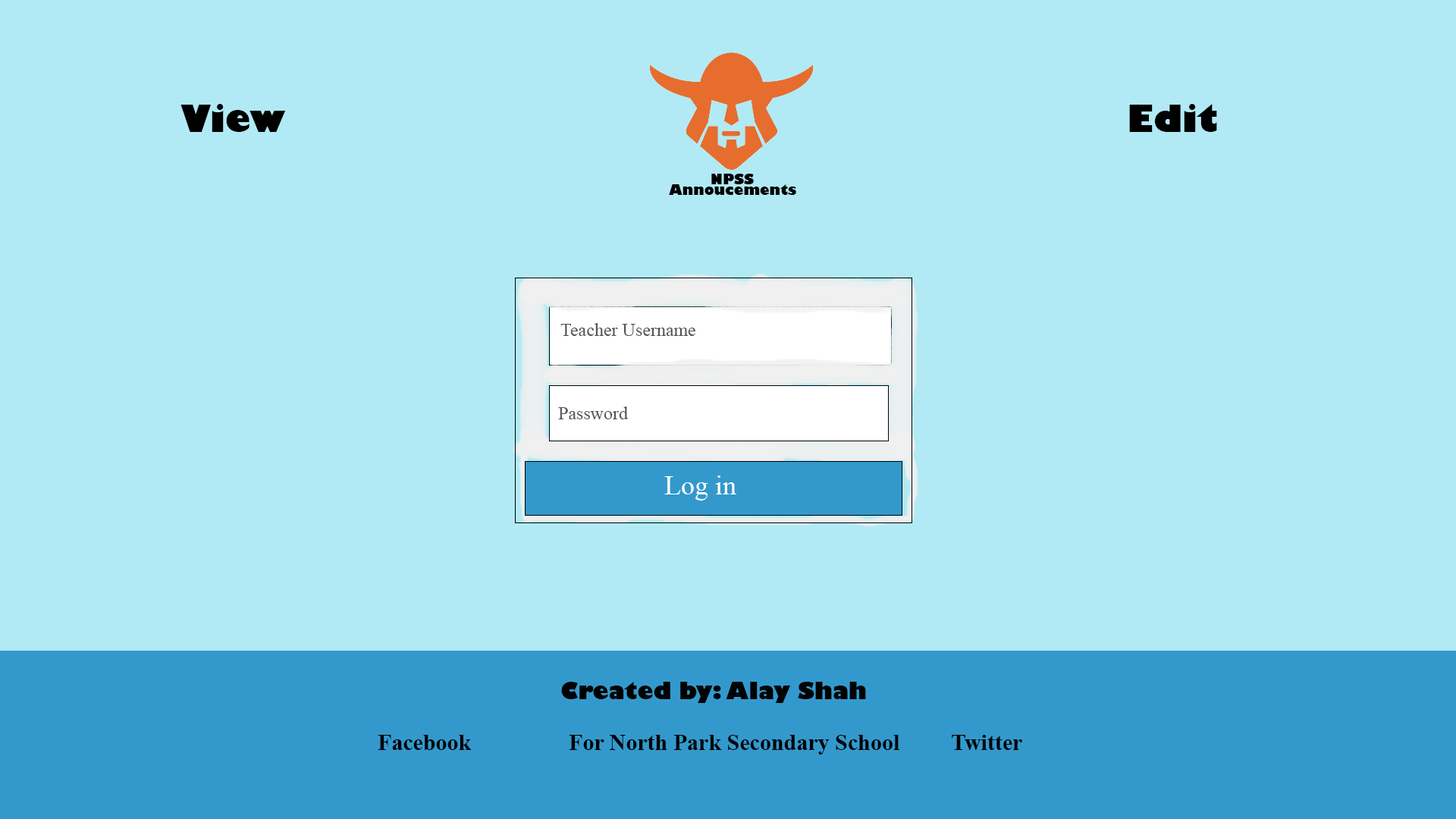
<style>
.page{position:relative;width:1456px;height:819px;background:#b1eaf5}
.page>*{position:absolute;margin:0}
.t1{font:36.4px "GillSans-UltraBold";color:#000000}
.t2{font:18.2px "TimesNewRomanPSMT";color:#555555}
.t3{font:27.3px "TimesNewRomanPSMT";color:#feffff}
.t4{font:22.7px "GillSans-UltraBold";color:#020202}
.t5{font:22.7px "TimesNewRomanPS-BoldMT";color:#020202}
</style>
<div class="page">
<p class="t1" style="left:180px;top:104px;width:106px;height:28px">View</p>
<p class="t1" style="left:1129px;top:104px;width:88px;height:28px">Edit</p>
<p class="t2" style="left:560px;top:323px;width:135px;height:13px">Teacher Username</p>
<p class="t2" style="left:558px;top:406px;width:70px;height:13px">Password</p>
<p class="t3" style="left:664px;top:475px;width:72px;height:25px">Log in</p>
<p class="t4" style="left:561px;top:682px;width:305px;height:21px">Created by: Alay Shah</p>
<p class="t5" style="left:378px;top:735px;width:644px;height:20px">Facebook    For North Park Secondary School  Twitter</p>
</div>
